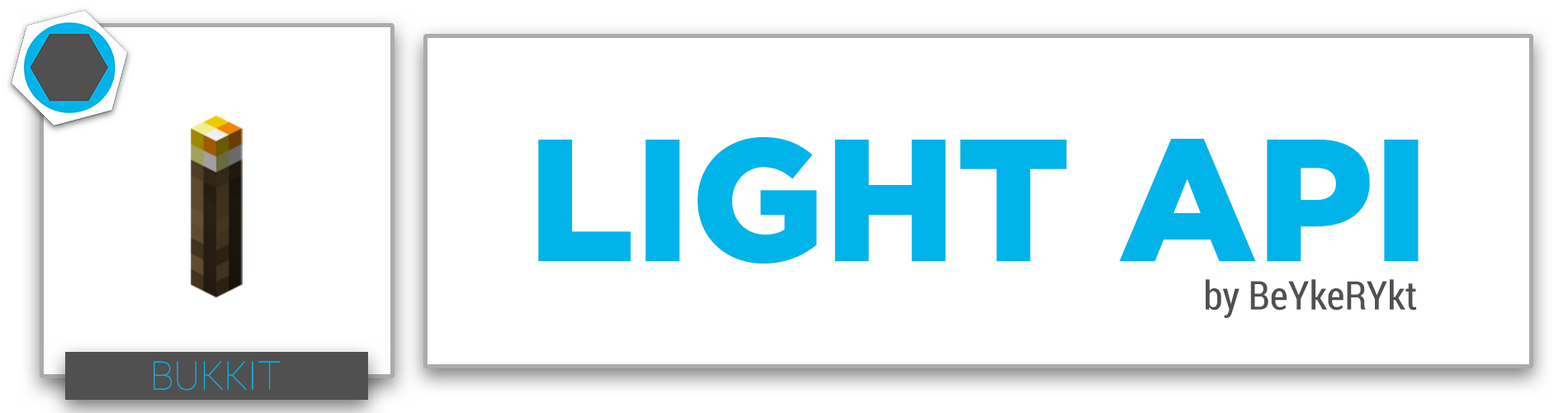
<style>
.page{position:relative;width:1568px;height:413px;background:#ffffff}
.page>*{position:absolute;margin:0}
.t1{font:173.3px "GothamPro-Black";color:#00b4e9}
.t2{font:39.6px "RobotoCondensed-Regular";color:#505050}
.t3{font:39.6px "Roboto-Thin";color:#00b4e9}
</style>
<div class="page">
<p class="t1" style="left:538px;top:137px;width:881px;height:126px">LIGHT API</p>
<p class="t2" style="left:1206px;top:279px;width:211px;height:39px">by BeYkeRYkt</p>
<p class="t3" style="left:153px;top:361px;width:127px;height:29px">BUKKIT</p>
</div>
